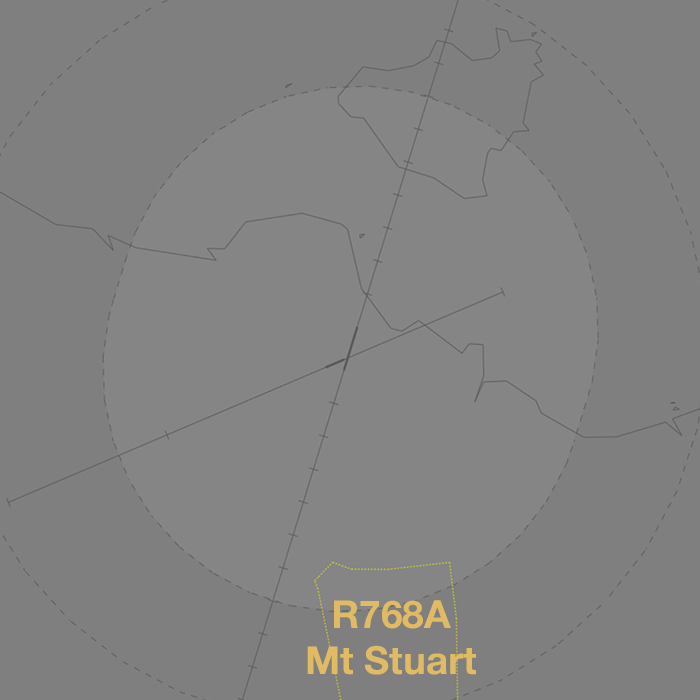
<style>
.page{position:relative;width:700px;height:700px;background:#7f7f7f}
.page>*{position:absolute;margin:0}
.t1{font:38.8px "HelveticaNeue-Bold";color:#e1bb63}
</style>
<div class="page">
<p class="t1" style="left:307px;top:600px;width:169px;height:75px;text-align:center">R768A<br>Mt Stuart</p>
</div>
